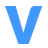
<style>
.page{position:relative;width:48px;height:48px;background:#ffffff}
.page>*{position:absolute;margin:0}
.t1{font:74px "Harabara";color:#4098fb}
</style>
<div class="page">
<p class="t1" style="left:5px;top:6px;width:38px;height:38px">v</p>
</div>
